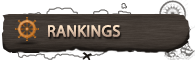
<style>
.page{position:relative;width:195px;height:60px;background:#ffffff}
.page>*{position:absolute;margin:0}
.t1{font:16px "MyriadPro-Regular";text-transform:uppercase;font-weight:bold}
</style>
<div class="page">
<p class="t1" style="left:48px;top:25px;width:72px;height:12px">Rankings</p>
</div>
